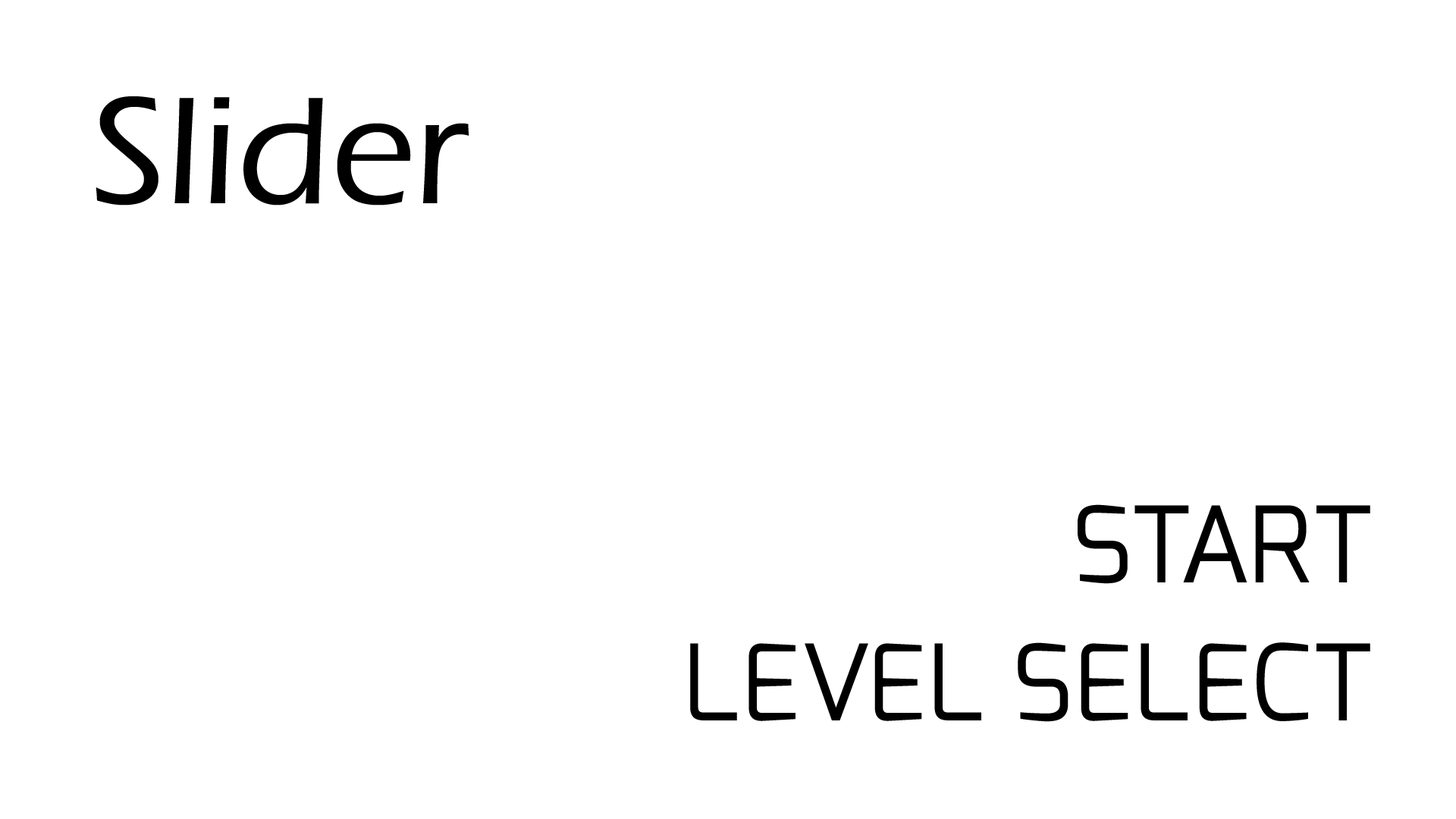
<style>
.page{position:relative;width:1456px;height:819px;background:#ffffff}
.page>*{position:absolute;margin:0}
.t1{font:158px "ErasITC-Medium";color:#000000}
.t2{font:105.2px "Exo-Regular";color:#000000}
</style>
<div class="page">
<p class="t1" style="left:96px;top:96px;width:373px;height:110px">Slider</p>
<p class="t2" style="left:1078px;top:504px;width:292px;height:80px">START</p>
<p class="t2" style="left:690px;top:642px;width:680px;height:80px">LEVEL SELECT</p>
</div>
